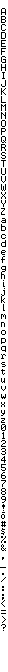
<style>
.page{position:relative;width:8px;height:672px;background:#ffffff}
.page>*{position:absolute;margin:0}
.t1{font:8px/8px "Terminal";color:#000000}
</style>
<div class="page">
<p class="t1" style="left:0px;top:8px;width:6px;height:623px">A<br>B<br>C<br>D<br>E<br>F<br>G<br>H<br>I<br>J<br>K<br>L<br>M<br>N<br>O<br>P<br>Q<br>R<br>S<br>T<br>U<br>V<br>W<br>X<br>Y<br>Z<br>a<br>b<br>c<br>d<br>e<br>f<br>g<br>h<br>i<br>j<br>k<br>l<br>m<br>n<br>o<br>p<br>q<br>r<br>s<br>t<br>u<br>v<br>w<br>x<br>y<br>z<br>0<br>1<br>2<br>3<br>4<br>5<br>6<br>7<br>8<br>9<br>!<br>“<br>#<br>$<br>%<br>&amp;<br>,<br>_<br>.<br>/<br>:<br>;<br>&lt;<br>=<br>&gt;<br>?</p>
</div>
